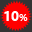
<style>
.page{position:relative;width:32px;height:32px;background:#ff0000}
.page>*{position:absolute;margin:0}
.t1{font:14px "NirmalaUI-Bold";color:#ffffff}
.t2{font:10px "NirmalaUI-Bold";color:#ffffff}
</style>
<div class="page">
<p class="t1" style="left:4px;top:11px;width:24px;height:10px">10<span class="t2">%</span></p>
</div>
